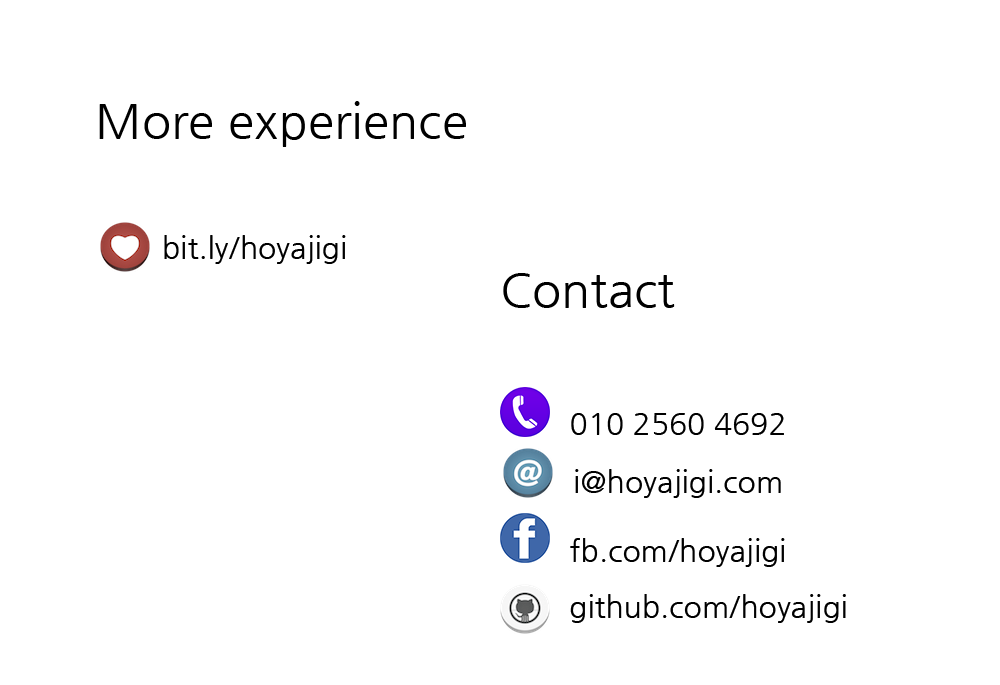
<style>
.page{position:relative;width:1000px;height:685px;background:#ffffff}
.page>*{position:absolute;margin:0}
.t1{font:48px "NanumGothic";color:#000000}
.t2{font:30px "NanumGothic";color:#000000}
</style>
<div class="page">
<p class="t1" style="left:99px;top:101px;width:367px;height:46px">More experience</p>
<p class="t2" style="left:164px;top:235px;width:182px;height:29px">bit.ly/hoyajigi</p>
<p class="t1" style="left:503px;top:273px;width:172px;height:35px">Contact</p>
<p class="t2" style="left:571px;top:413px;width:213px;height:22px">010 2560 4692</p>
<p class="t2" style="left:575px;top:469px;width:206px;height:29px">i@hoyajigi.com</p>
<p class="t2" style="left:570px;top:538px;width:215px;height:29px">fb.com/hoyajigi</p>
<p class="t2" style="left:570px;top:594px;width:276px;height:29px">github.com/hoyajigi</p>
</div>
